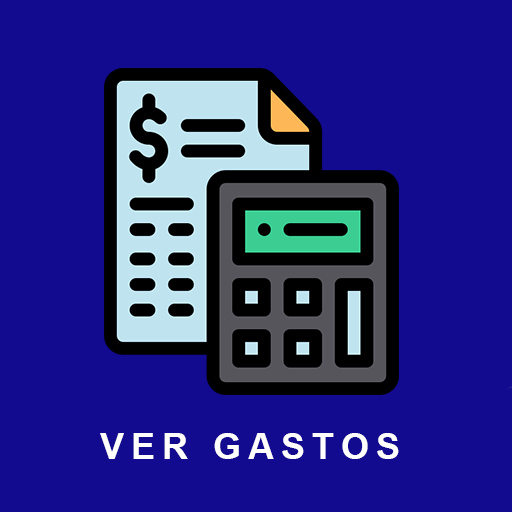
<style>
.page{position:relative;width:512px;height:512px;background:#120a8f}
.page>*{position:absolute;margin:0}
.t1{font:36px "Arial-BoldMT";letter-spacing:0.2em;color:#ffffff;text-transform:uppercase}
</style>
<div class="page">
<p class="t1" style="left:100px;top:433px;width:299px;height:26px">VER GASTOS</p>
</div>
